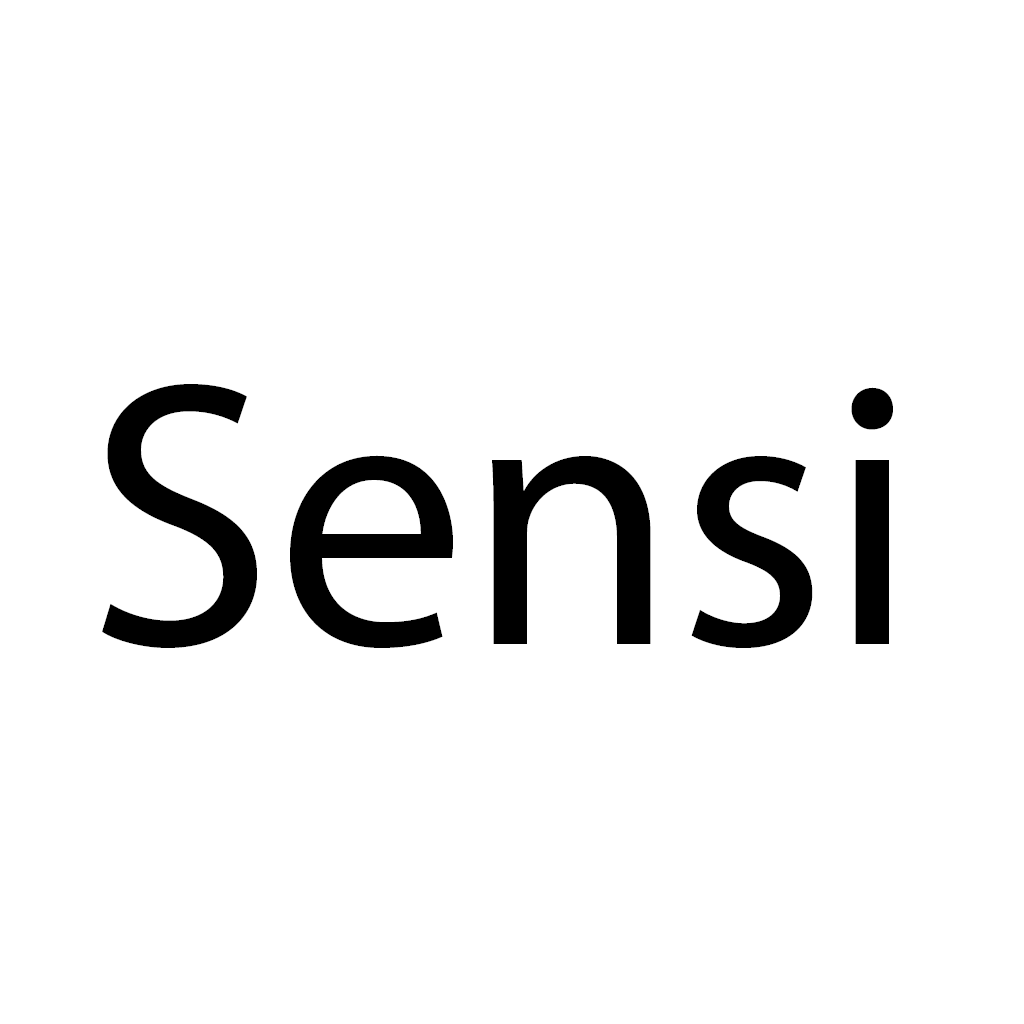
<style>
.page{position:relative;width:1024px;height:1024px;background:#ffffff}
.page>*{position:absolute;margin:0}
.t1{font:380px "MyriadPro-Regular";color:#000000}
</style>
<div class="page">
<p class="t1" style="left:102px;top:384px;width:791px;height:264px">Sensi</p>
</div>
